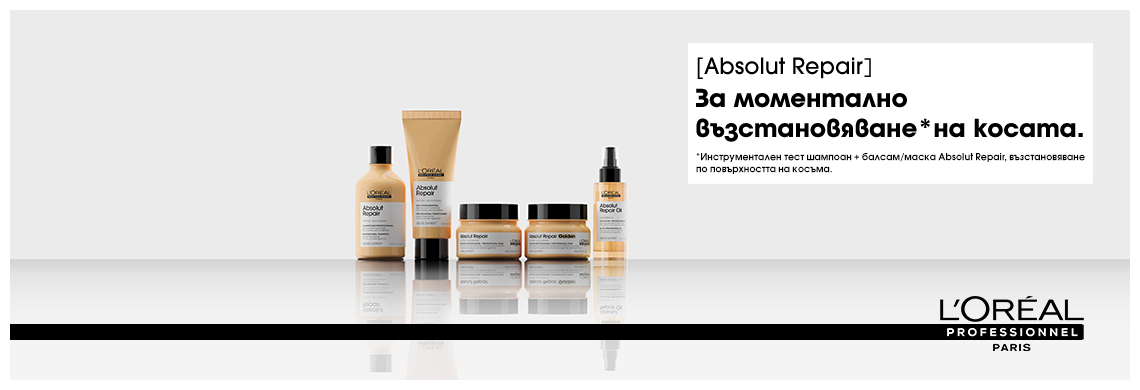
<style>
.page{position:relative;width:1140px;height:390px;background:#ebebeb}
.page>*{position:absolute;margin:0}
.t1{font:22.5px "ITCAvantGardeStd-Md";color:#000000}
.t2{font:22.5px "ITCAvantGardeStd-MdCn";color:#000000}
.t3{font:22.5px "GothamPro";color:#000000}
.t4{font:24.5px/29.9px "SPAvant-Bold";letter-spacing:-0.01em;color:#000000}
.t5{font:9.6px/11.9px "AvantGardeGothicC-Bold";color:#000000}
</style>
<div class="page">
<p class="t1" style="left:697px;top:57px;width:174px;height:22px"><span class="t2">[</span>Absolut Repair<span class="t3">]</span></p>
<p class="t4" style="left:696px;top:88px;width:387px;height:54px">За моментално възстановяване*на косата.</p>
<p class="t5" style="left:696px;top:153px;width:389px;height:21px">*Инструментален тест шампоан + балсам/маска Absolut Repair, възстановяване <br>по повърхността на косъма.</p>
</div>
